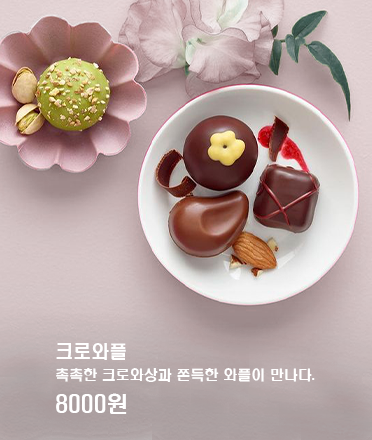
<style>
.page{position:relative;width:372px;height:440px}
.page>*{position:absolute;margin:0}
.t1{font:14px/25px "H2hdrM";color:#ffffff}
.t2{font:18px/25px "H2hdrM";color:#ffffff}
.t3{font:22px/25px "H2hdrM";color:#ffffff}
</style>
<div class="page">
<p class="t1" style="left:56px;top:343px;width:259px;height:71px"><span class="t2">크로와플<br></span>촉촉한 크로와상과 쫀득한 와플이 만나다. <br><span class="t3">8000원</span></p>
</div>
